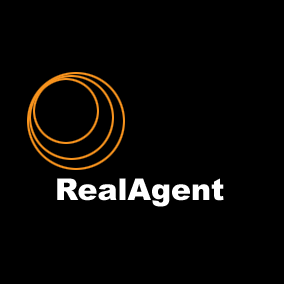
<style>
.page{position:relative;width:284px;height:284px;background:#000000}
.page>*{position:absolute;margin:0}
.t1{font:30px "Arial-Black";color:#ffffff}
</style>
<div class="page">
<p class="t1" style="left:57px;top:178px;width:167px;height:29px">RealAgent</p>
</div>
